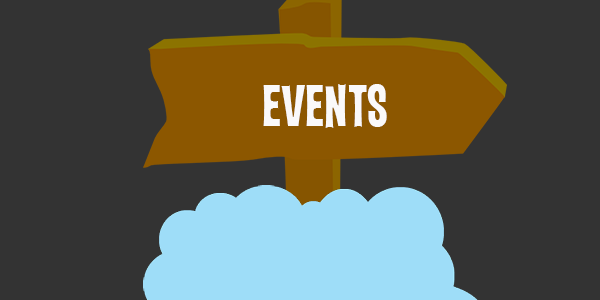
<style>
.page{position:relative;width:600px;height:300px;background:#333333}
.page>*{position:absolute;margin:0}
.t1{font:59.7px "LasVegas-Jackpot";color:#faf9f9;text-transform:uppercase}
</style>
<div class="page">
<p class="t1" style="left:263px;top:84px;width:124px;height:44px">events</p>
</div>
